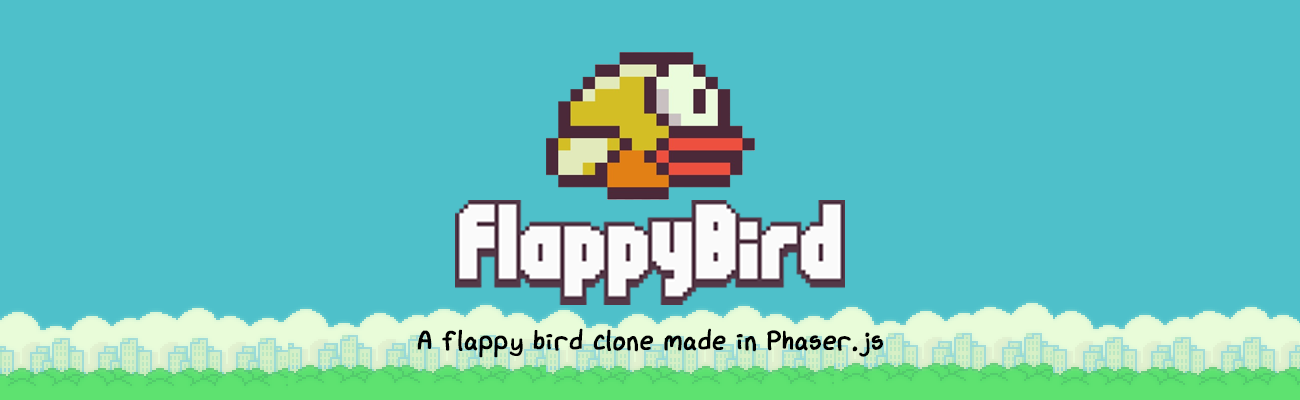
<style>
.page{position:relative;width:1300px;height:400px;background:#4ec0ca}
.page>*{position:absolute;margin:0}
.t1{font:48px "xkcdScript";color:#000000;font-weight:bold}
</style>
<div class="page">
<p class="t1" style="left:417px;top:328px;width:466px;height:30px">A flappy bird clone made in Phaser.js</p>
</div>
